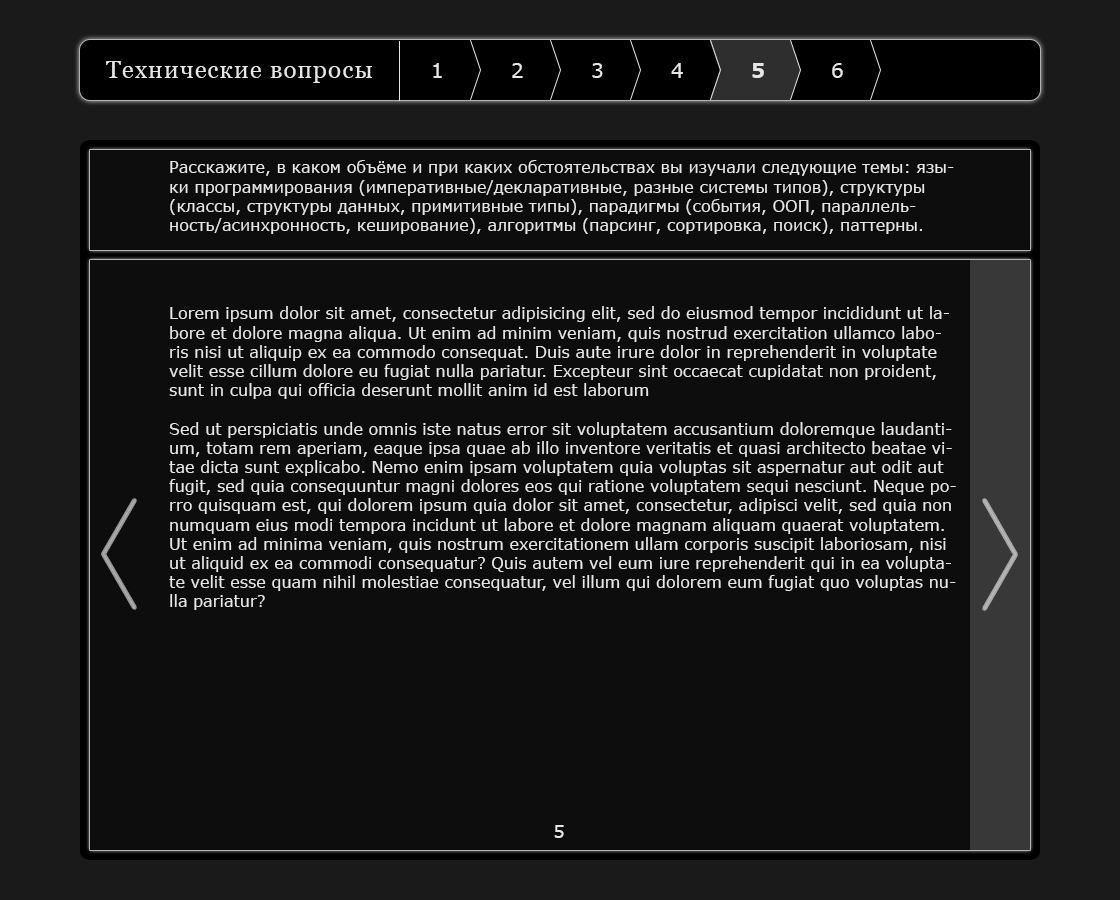
<style>
.page{position:relative;width:1120px;height:900px;background:#0d0d0d}
.page>*{position:absolute;margin:0}
.t1{font:24px "Georgia";letter-spacing:0.05em;color:#e6e6e6}
.t2{font:20px "Verdana";letter-spacing:0.05em;color:#e6e6e6}
.t3{font:20px "Verdana-Bold";letter-spacing:0.05em;color:#e6e6e6}
.t4{font:16px "Verdana";color:#e6e6e6}
.t5{font:18px "Verdana";color:#e6e6e6}
</style>
<div class="page">
<p class="t1" style="left:106px;top:61px;width:266px;height:22px">Технические вопросы</p>
<p class="t2" style="left:433px;top:63px;width:9px;height:15px">1</p>
<p class="t2" style="left:512px;top:63px;width:11px;height:15px">2</p>
<p class="t2" style="left:592px;top:63px;width:11px;height:15px">3</p>
<p class="t2" style="left:671px;top:63px;width:12px;height:15px">4</p>
<p class="t3" style="left:752px;top:63px;width:12px;height:15px">5</p>
<p class="t2" style="left:832px;top:63px;width:11px;height:15px">6</p>
<p class="t4" style="left:170px;top:160px;width:784px;height:74px">Расскажите, в каком объёме и при каких обстоятельствах вы изучали следующие темы: язы-<br>ки программирования (императивные/декларативные, разные системы типов), структуры<br>(классы, структуры данных, примитивные типы), парадигмы (события, ООП, параллель-<br>ность/асинхронность, кеширование), алгоритмы (парсинг, сортировка, поиск), паттерны.</p>
<p class="t4" style="left:169px;top:306px;width:787px;height:304px">Lorem ipsum dolor sit amet, consectetur adipisicing elit, sed do eiusmod tempor incididunt ut la-<br>bore et dolore magna aliqua. Ut enim ad minim veniam, quis nostrud exercitation ullamco labo-<br>ris nisi ut aliquip ex ea commodo consequat. Duis aute irure dolor in reprehenderit in voluptate<br>velit esse cillum dolore eu fugiat nulla pariatur. Excepteur sint occaecat cupidatat non proident,<br>sunt in culpa qui officia deserunt mollit anim id est laborum<br><br>Sed ut perspiciatis unde omnis iste natus error sit voluptatem accusantium doloremque laudanti-<br>um, totam rem aperiam, eaque ipsa quae ab illo inventore veritatis et quasi architecto beatae vi-<br>tae dicta sunt explicabo. Nemo enim ipsam voluptatem quia voluptas sit aspernatur aut odit aut<br>fugit, sed quia consequuntur magni dolores eos qui ratione voluptatem sequi nesciunt. Neque po-<br>rro quisquam est, qui dolorem ipsum quia dolor sit amet, consectetur, adipisci velit, sed quia non<br>numquam eius modi tempora incidunt ut labore et dolore magnam aliquam quaerat voluptatem.<br>Ut enim ad minima veniam, quis nostrum exercitationem ullam corporis suscipit laboriosam, nisi<br>ut aliquid ex ea commodi consequatur? Quis autem vel eum iure reprehenderit qui in ea volupta-<br>te velit esse quam nihil molestiae consequatur, vel illum qui dolorem eum fugiat quo voluptas nu-<br>lla pariatur?</p>
<p class="t5" style="left:554px;top:825px;width:10px;height:13px">5</p>
</div>
